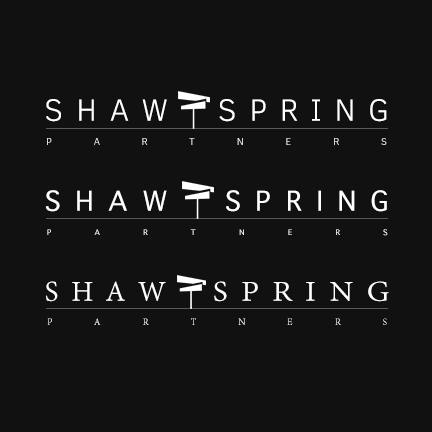
<style>
.page{position:relative;width:432px;height:432px;background:#111111}
.page>*{position:absolute;margin:0}
.t1{font:31.4px "ClearSans-Light";letter-spacing:0.4em;color:#ffffff}
.t2{font:10px "ClearSans-Light";letter-spacing:4.17em;color:#ffffff}
.t3{font:37px "AppleSymbols";letter-spacing:0.4em;color:#ffffff}
.t4{font:10.4px "AppleSymbols";letter-spacing:4.17em;color:#ffffff}
.t5{font:31px "AdobeDevanagari-Regular";letter-spacing:0.4em;color:#ffffff}
.t6{font:31px "AdobeDevanagari-Regular";letter-spacing:0.4em;color:#ffffff;scale:1.1 1}
.t7{font:10.4px "AdobeDevanagari-Regular";letter-spacing:4em}
</style>
<div class="page">
<p class="t1" style="left:46px;top:99px;width:121px;height:23px">SHAW</p>
<p class="t1" style="left:219px;top:99px;width:168px;height:23px">SPRING</p>
<p class="t2" style="left:47px;top:138px;width:340px;height:7px">PARTNERS</p>
<p class="t3" style="left:45px;top:190px;width:122px;height:22px">SHAW</p>
<p class="t3" style="left:226px;top:190px;width:161px;height:22px">SPRING</p>
<p class="t4" style="left:47px;top:229px;width:341px;height:7px">PARTNERS</p>
<p class="t5" style="left:46px;top:281px;width:120px;height:21px">SHAW</p>
<p class="t6" style="left:214px;top:281px;width:175px;height:21px">SPRING</p>
<p class="t7" style="left:47px;top:318px;width:340px;height:7px">PARTNERS</p>
</div>
